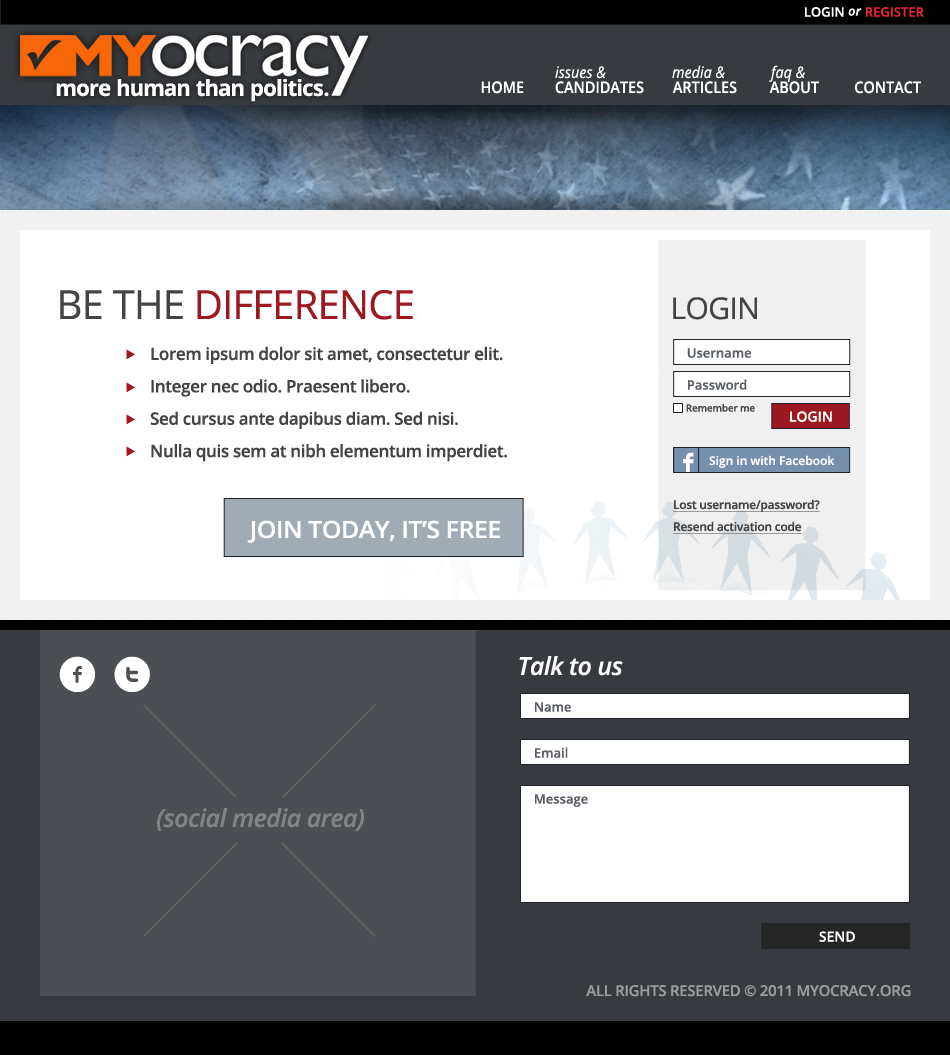
<style>
.page{position:relative;width:950px;height:1055px;background:#ffffff}
.page>*{position:absolute;margin:0}
.t1{font:13px "OpenSans-Semibold";color:#ffffff;text-transform:uppercase}
.t2{font:13px "OpenSans-SemiboldItalic";color:#ffffff}
.t3{font:13px "OpenSans-Semibold";color:#ec2432;text-transform:uppercase}
.t4{font:16px "OpenSans-Italic";color:#ffffff;scale:0.9 1}
.t5{font:22.2px "OpenSans-Bold";letter-spacing:-0.02em;color:#ffffff}
.t6{font:16px "OpenSans-Semibold";color:#ffffff;text-transform:uppercase;scale:0.9 1}
.t7{font:40px "OpenSans";letter-spacing:-0.02em;color:#9e1822;text-transform:uppercase}
.t8{font:40px "OpenSans";letter-spacing:-0.02em;color:#444444;text-transform:uppercase}
.t9{font:30px "OpenSans";letter-spacing:-0.02em;color:#444444;text-transform:uppercase}
.t10{font:17px "OpenSans-Semibold";letter-spacing:-0.02em;color:#444444}
.t11{font:13px "OpenSans-Semibold";color:#5a5e65}
.t12{font:10px "OpenSans-Semibold";letter-spacing:-0.02em;color:#444444}
.t13{font:14px "OpenSans-Semibold";color:#ffffff}
.t14{font:31px "Socialico";color:#ffffff}
.t15{font:12px "OpenSans-Semibold";color:#ffffff}
.t16{font:12px "OpenSans-Semibold";letter-spacing:-0.02em;color:#444444;text-decoration:underline}
.t17{font:23.7px "OpenSans-Semibold";letter-spacing:-0.02em;color:#ffffff;text-transform:uppercase;scale:1.05 1}
.t18{font:50px "Socialico";letter-spacing:0.3em;color:#ffffff}
.t19{font:25px "OpenSans-SemiboldItalic";letter-spacing:-0.02em;color:#ffffff}
.t20{font:25px "OpenSans-SemiboldItalic";letter-spacing:-0.02em;color:#818386}
.t21{font:15px "OpenSans-Semibold";letter-spacing:-0.02em;color:#9c9c9c;text-transform:uppercase}
</style>
<div class="page">
<p class="t1" style="left:805px;top:7px;width:57px;height:10px">Login <span class="t2">or</span></p>
<p class="t3" style="left:866px;top:7px;width:58px;height:10px">Register</p>
<p class="t4" style="left:672px;top:65px;width:53px;height:14px">media &amp;</p>
<p class="t4" style="left:769px;top:65px;width:36px;height:17px">faq &amp;</p>
<p class="t4" style="left:555px;top:66px;width:51px;height:13px">issues &amp;</p>
<p class="t5" style="left:56px;top:79px;width:273px;height:23px">more human than politics.</p>
<p class="t6" style="left:481px;top:81px;width:43px;height:13px">home</p>
<p class="t6" style="left:555px;top:81px;width:89px;height:13px">candidates</p>
<p class="t6" style="left:672px;top:81px;width:65px;height:13px">articles</p>
<p class="t6" style="left:769px;top:81px;width:50px;height:13px">ABOUT</p>
<p class="t6" style="left:855px;top:81px;width:66px;height:13px">contact</p>
<p class="t7" style="left:60px;top:290px;width:353px;height:30px"><span class="t8">be the </span>difference</p>
<p class="t9" style="left:673px;top:297px;width:84px;height:23px">login</p>
<p class="t10" style="left:150px;top:346px;width:357px;height:116px">Lorem ipsum dolor sit amet, consectetur elit.<br>Integer nec odio. Praesent libero.<br>Sed cursus ante dapibus diam. Sed nisi.<br>Nulla quis sem at nibh elementum imperdiet.</p>
<p class="t11" style="left:687px;top:348px;width:64px;height:10px">Username</p>
<p class="t11" style="left:688px;top:379px;width:59px;height:11px">Password</p>
<p class="t12" style="left:686px;top:404px;width:69px;height:8px">Remember me</p>
<p class="t13" style="left:790px;top:411px;width:42px;height:11px">LOGIN</p>
<p class="t14" style="left:683px;top:452px;width:11px;height:20px">F</p>
<p class="t15" style="left:709px;top:455px;width:126px;height:13px">Sign in with Facebook</p>
<p class="t16" style="left:673px;top:499px;width:147px;height:13px">Lost username/password?</p>
<p class="t17" style="left:247px;top:520px;width:253px;height:23px">join today, it’s free</p>
<p class="t16" style="left:673px;top:521px;width:129px;height:13px">Resend activation code</p>
<p class="t18" style="left:59px;top:656px;width:91px;height:36px">ft</p>
<p class="t19" style="left:519px;top:656px;width:104px;height:20px">Talk to us</p>
<p class="t11" style="left:535px;top:702px;width:36px;height:10px">Name</p>
<p class="t11" style="left:535px;top:747px;width:33px;height:11px">Email</p>
<p class="t11" style="left:535px;top:794px;width:53px;height:13px">Message</p>
<p class="t20" style="left:157px;top:808px;width:207px;height:23px">(social media area)</p>
<p class="t13" style="left:819px;top:931px;width:36px;height:11px">SEND</p>
<p class="t21" style="left:586px;top:985px;width:325px;height:12px">all rights reserved © 2011 myocracy.org</p>
</div>
